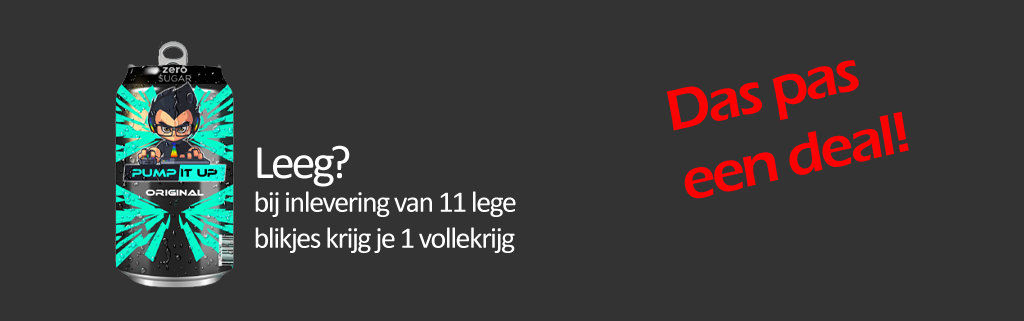
<style>
.page{position:relative;width:1024px;height:321px;background:#333333}
.page>*{position:absolute;margin:0}
.t1{font:59.2px "ErasITC-Demi";letter-spacing:-0.05em;color:#ff0000}
.t2{font:48px "Calibri";letter-spacing:-0.05em;color:#ffffff}
.t3{font:30px "Calibri";letter-spacing:-0.05em;color:#ffffff}
</style>
<div class="page">
<p class="t1" style="left:666px;top:60px;width:243px;height:139px;rotate:-13deg">Das pas een deal!</p>
<p class="t2" style="left:257px;top:145px;width:93px;height:42px">Leeg?</p>
<p class="t3" style="left:255px;top:191px;width:261px;height:62px">bij inlevering van 11 lege blikjes krijg je 1 vollekrijg</p>
</div>
